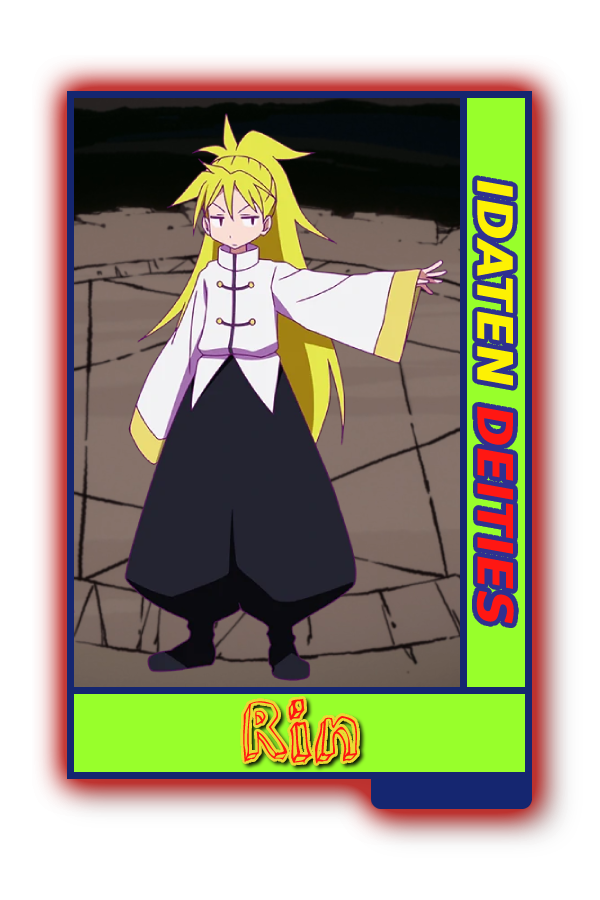
<style>
.page{position:relative;width:600px;height:900px;background:#ffffff}
.page>*{position:absolute;margin:0}
.t1{font:48.8px "MADETOMMY-Bold";color:#ff1713;font-weight:bold;font-style:italic}
.t2{font:48.8px "MADETOMMY-Bold";color:#fdf103;font-weight:bold;font-style:italic}
.t3{font:75px "3dumb";color:#ff1611}
</style>
<div class="page">
<p class="t1" style="left:476px;top:180px;width:38px;height:444px;rotate:90deg"><span class="t2">IDATEN </span>DEITIES</p>
<p class="t3" style="left:242px;top:698px;width:116px;height:66px">Rin</p>
</div>
